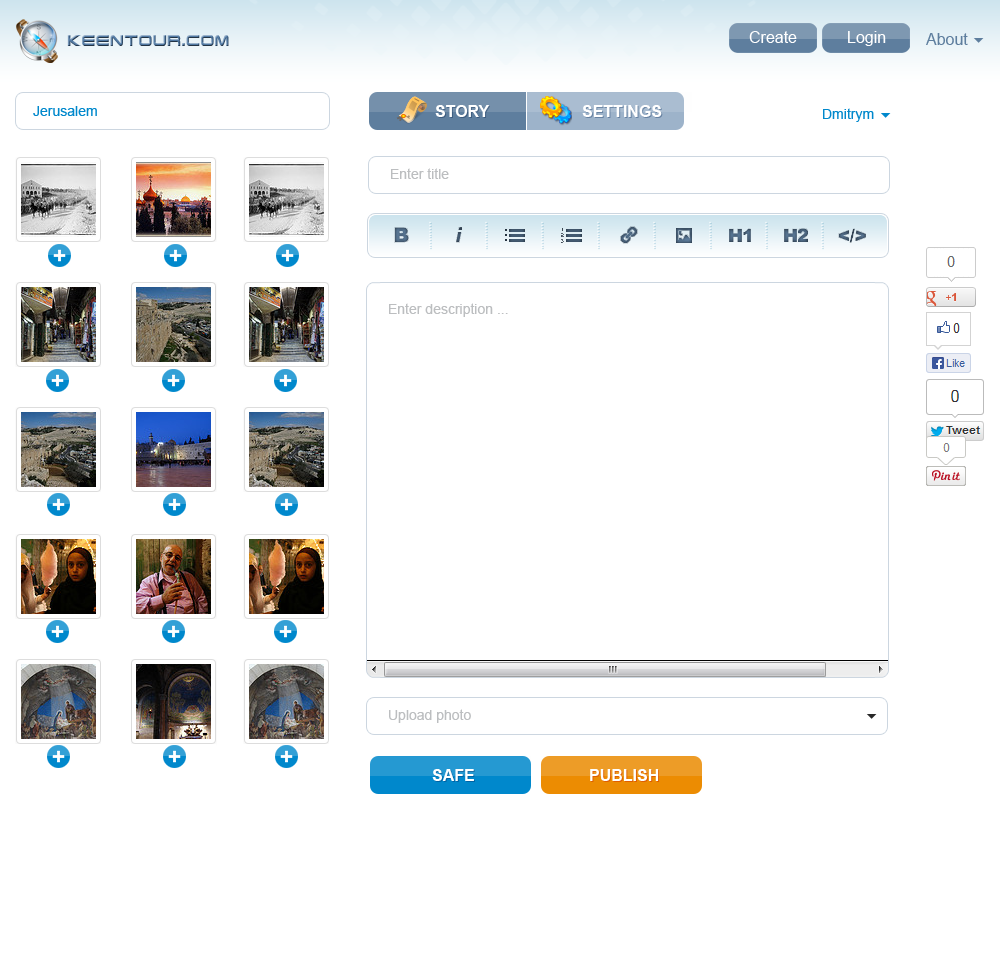
<style>
.page{position:relative;width:1000px;height:956px;background:#ffffff}
.page>*{position:absolute;margin:0}
.t1{font:15px "TerminatorCyr4-Semi-expandedBold";letter-spacing:0.05em;scale:0.8 1}
.t2{font:16px "ArialMT";color:#ffffff}
.t3{font:16px "ArialMT";color:#5e7e9e}
.t4{font:14px "ArialMT";color:#0088cc}
.t5{font:16px "Arial-BoldMT";color:#ffffff;text-transform:uppercase}
.t6{font:14px "ArialMT";color:#bcbec0}
.t7{font:10px "ArialMT"}
</style>
<div class="page">
<p class="t1" style="left:67px;top:35px;width:162px;height:11px">keentour.com</p>
<p class="t2" style="left:749px;top:31px;width:48px;height:12px">Create</p>
<p class="t2" style="left:848px;top:31px;width:38px;height:15px">Login</p>
<p class="t3" style="left:926px;top:33px;width:42px;height:12px">About</p>
<p class="t4" style="left:33px;top:106px;width:64px;height:10px">Jerusalem</p>
<p class="t5" style="left:435px;top:105px;width:54px;height:12px">Story</p>
<p class="t5" style="left:582px;top:105px;width:80px;height:12px">Settings</p>
<p class="t4" style="left:823px;top:108px;width:51px;height:14px">Dmitrym</p>
<p class="t6" style="left:391px;top:168px;width:58px;height:11px">Enter title</p>
<p class="t7" style="left:429px;top:221px;width:2px;height:28px;rotate:90deg">..........</p>
<p class="t7" style="left:485px;top:221px;width:2px;height:28px;rotate:90deg">..........</p>
<p class="t7" style="left:541px;top:221px;width:2px;height:28px;rotate:90deg">..........</p>
<p class="t7" style="left:597px;top:221px;width:2px;height:28px;rotate:90deg">..........</p>
<p class="t7" style="left:653px;top:221px;width:2px;height:28px;rotate:90deg">..........</p>
<p class="t7" style="left:709px;top:221px;width:2px;height:28px;rotate:90deg">..........</p>
<p class="t7" style="left:765px;top:221px;width:2px;height:28px;rotate:90deg">..........</p>
<p class="t7" style="left:821px;top:221px;width:2px;height:28px;rotate:90deg">..........</p>
<p class="t6" style="left:389px;top:303px;width:119px;height:14px">Enter description ...</p>
<p class="t6" style="left:389px;top:709px;width:82px;height:14px">Upload photo</p>
<p class="t5" style="left:432px;top:769px;width:42px;height:12px">Safe</p>
<p class="t5" style="left:590px;top:769px;width:69px;height:12px">Publish</p>
</div>
